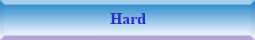
<style>
.page{position:relative;width:255px;height:40px}
.page>*{position:absolute;margin:0}
.t1{font:15.8px "TimesNewRomanPS-BoldMT";color:#2c32d2}
</style>
<div class="page">
<p class="t1" style="left:110px;top:13px;width:36px;height:11px">Hard</p>
</div>
